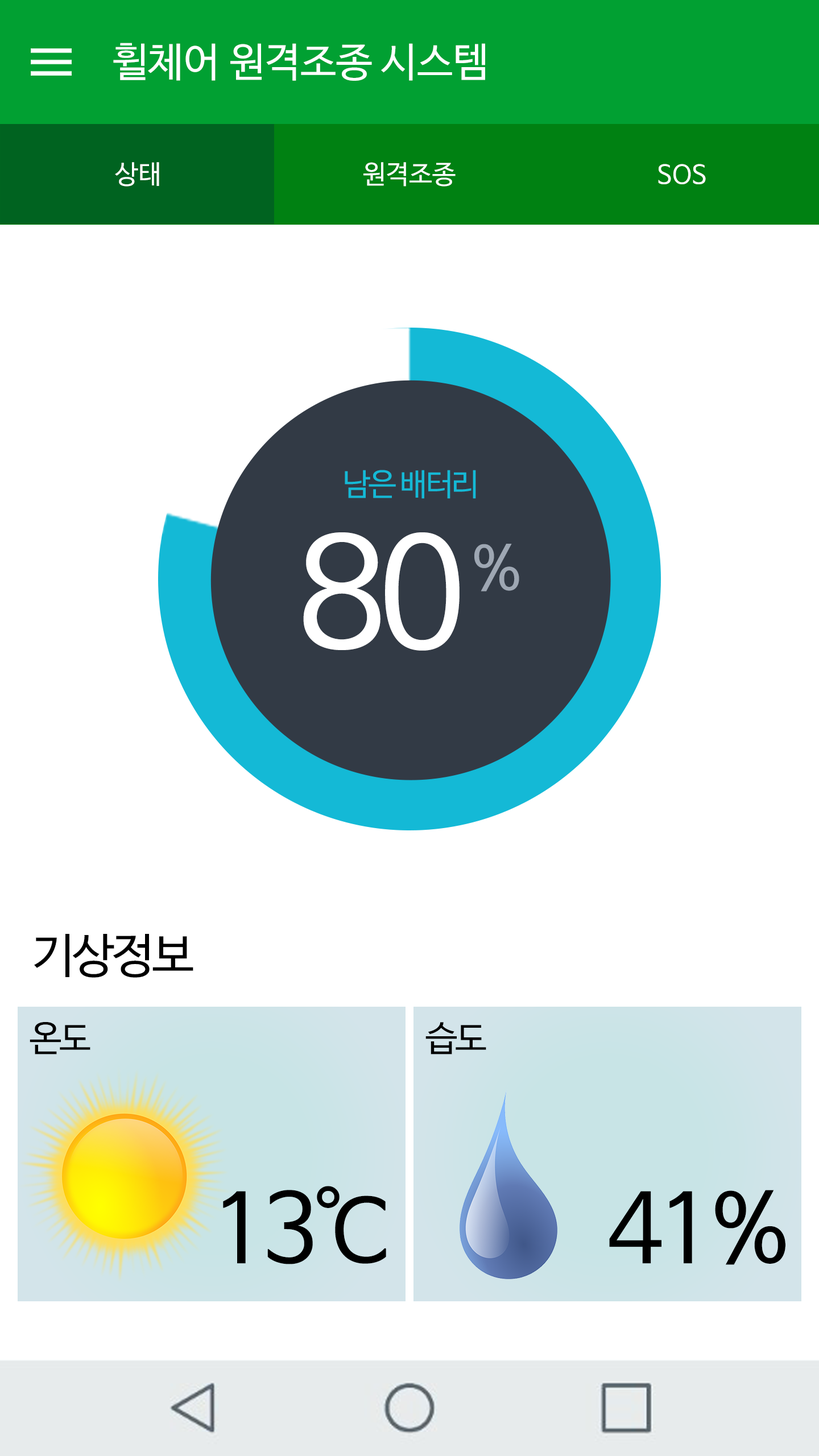
<style>
.page{position:relative;width:819px;height:1456px;background:#ffffff}
.page>*{position:absolute;margin:0}
.t1{font:40.3px "NanumBarunGothicOTF";color:#ffffff}
.t2{font:26.1px "NanumBarunGothicOTF";color:#ffffff}
.t3{font:30.8px "NanumBarunGothicOTF";letter-spacing:-0.05em;color:#14b9d6}
.t4{font:150.8px "NanumBarunGothicOTF";letter-spacing:-0.05em;color:#ffffff}
.t5{font:60.3px "NanumBarunGothicOTF";color:#9ea7b3}
.t6{font:47.4px "NanumBarunGothicOTF";letter-spacing:-0.05em;color:#000000}
.t7{font:35.5px "NanumBarunGothicOTF";letter-spacing:-0.05em;color:#000000}
.t8{font:94.8px "NanumBarunGothicOTF";letter-spacing:-0.05em;color:#000000}
</style>
<div class="page">
<p class="t1" style="left:113px;top:43px;width:372px;height:38px">휠체어 원격조종 시스템</p>
<p class="t2" style="left:115px;top:162px;width:44px;height:25px">상태</p>
<p class="t2" style="left:363px;top:162px;width:93px;height:25px">원격조종</p>
<p class="t2" style="left:658px;top:164px;width:48px;height:20px">SOS</p>
<p class="t3" style="left:345px;top:470px;width:131px;height:29px">남은 배터리</p>
<p class="t4" style="left:303px;top:532px;width:157px;height:119px">80</p>
<p class="t5" style="left:474px;top:544px;width:45px;height:47px">%</p>
<p class="t6" style="left:34px;top:934px;width:159px;height:44px">기상정보</p>
<p class="t7" style="left:30px;top:1022px;width:60px;height:32px">온도</p>
<p class="t7" style="left:425px;top:1022px;width:61px;height:32px">습도</p>
<p class="t8" style="left:223px;top:1186px;width:163px;height:78px">13℃</p>
<p class="t8" style="left:609px;top:1190px;width:176px;height:75px">41%</p>
</div>
